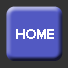
<style>
.page{position:relative;width:68px;height:68px;background:#5259c2}
.page>*{position:absolute;margin:0}
.t1{font:14px "BerlinSansFBDemi-Bold";color:#ffffff}
</style>
<div class="page">
<p class="t1" style="left:16px;top:29px;width:38px;height:10px">HOME</p>
</div>
